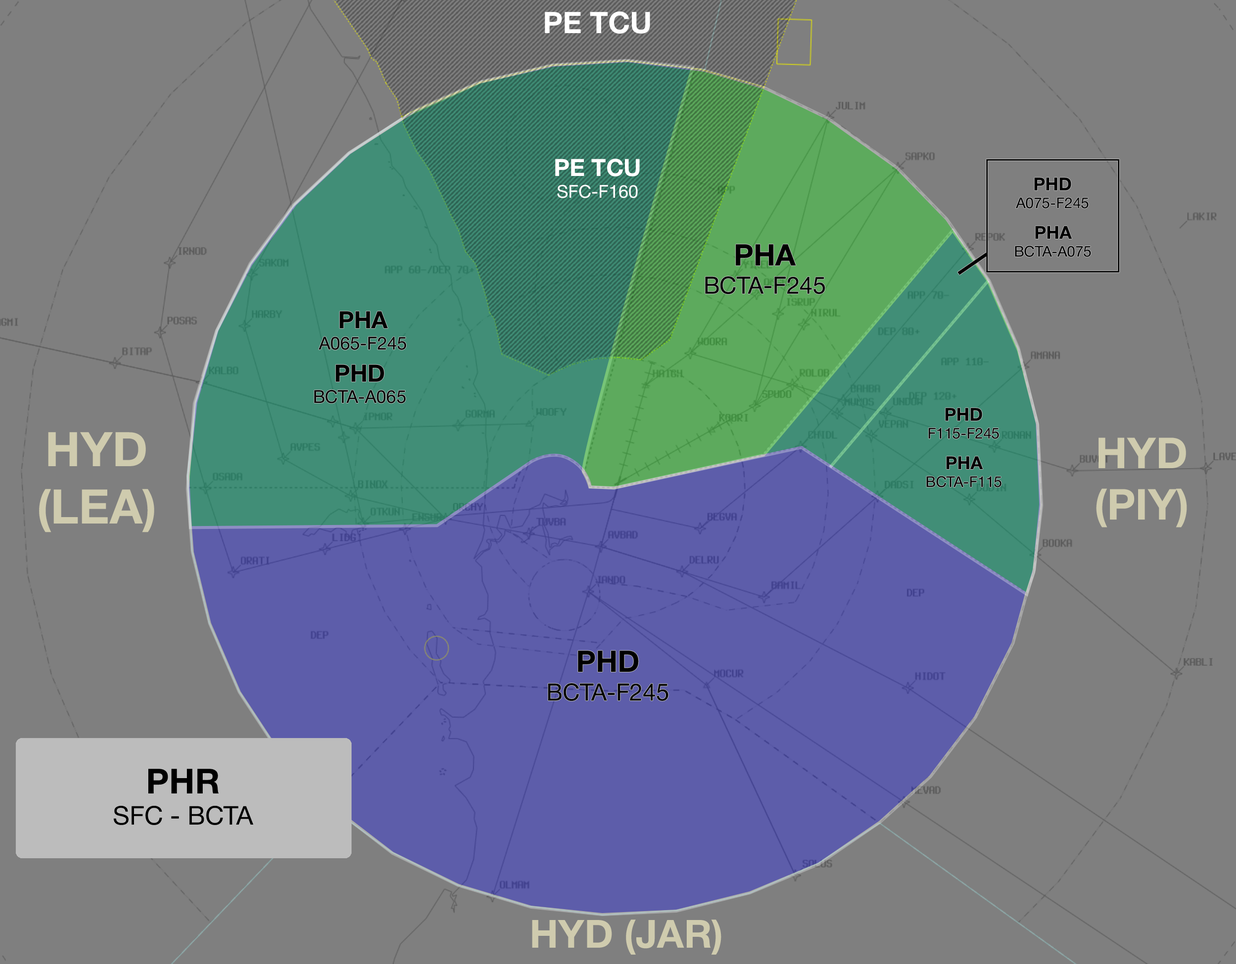
<style>
.page{position:relative;width:1236px;height:964px;background:#7f7f7f}
.page>*{position:absolute;margin:0}
.t1{font:29.7px "HelveticaNeue-Bold";color:#ffffff}
.t2{font:17.8px "HelveticaNeue-Roman";color:#ffffff}
.t3{font:23.7px "HelveticaNeue-Bold";color:#ffffff}
.t4{font:14.8px "HelveticaNeue-Roman";color:#000000}
.t5{font:17.8px "HelveticaNeue-Bold";color:#000000}
.t6{font:23.7px "HelveticaNeue-Roman";color:#000000}
.t7{font:29.7px "HelveticaNeue-Bold";color:#000000}
.t8{font:17.8px "HelveticaNeue-Roman";color:#000000}
.t9{font:23.7px "HelveticaNeue-Bold";color:#000000}
.t10{font:47.7px "HelveticaNeue-Bold";color:#cfcbae}
.t11{font:42.8px "HelveticaNeue-Bold";color:#cfcbae}
.t12{font:25.9px "HelveticaNeue-Roman";color:#000000}
.t13{font:34.5px "HelveticaNeue-Bold";color:#000000}
.t14{font:38.9px "HelveticaNeue-Bold";color:#cfcbae}
</style>
<div class="page">
<p class="t1" style="left:545px;top:11px;width:105px;height:23px">PE TCU</p>
<p class="t2" style="left:555px;top:159px;width:85px;height:39px;text-align:center"><span class="t3">PE TCU<br></span>SFC-F160</p>
<p class="t4" style="left:1016px;top:178px;width:73px;height:31px;text-align:center"><span class="t5">PHD<br></span>A075-F245</p>
<p class="t4" style="left:1015px;top:226px;width:77px;height:31px;text-align:center"><span class="t5">PHA<br></span>BCTA-A075</p>
<p class="t6" style="left:705px;top:244px;width:120px;height:50px;text-align:center"><span class="t7">PHA<br></span>BCTA-F245</p>
<p class="t8" style="left:319px;top:311px;width:88px;height:39px;text-align:center"><span class="t9">PHA<br></span>A065-F245</p>
<p class="t8" style="left:314px;top:364px;width:92px;height:40px;text-align:center"><span class="t9">PHD<br></span>BCTA-A065</p>
<p class="t4" style="left:929px;top:408px;width:71px;height:31px;text-align:center"><span class="t5">PHD<br></span>F115-F245</p>
<p class="t10" style="left:39px;top:432px;width:115px;height:101px;text-align:center">HYD<br>(LEA)</p>
<p class="t11" style="left:1096px;top:438px;width:91px;height:90px;text-align:center">HYD<br>(PIY)</p>
<p class="t4" style="left:927px;top:456px;width:75px;height:32px;text-align:center"><span class="t5">PHA<br></span>BCTA-F115</p>
<p class="t6" style="left:548px;top:651px;width:121px;height:50px;text-align:center"><span class="t7">PHD<br></span>BCTA-F245</p>
<p class="t12" style="left:114px;top:769px;width:140px;height:56px;text-align:center"><span class="t13">PHR<br></span>SFC - BCTA</p>
<p class="t14" style="left:532px;top:920px;width:190px;height:35px">HYD (JAR)</p>
</div>
